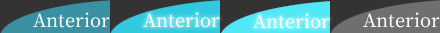
<style>
.page{position:relative;width:440px;height:33px;background:#333333}
.page>*{position:absolute;margin:0}
.t1{font:22px "OfficialFateFont-Medium";color:#ffffff}
</style>
<div class="page">
<p class="t1" style="left:33px;top:12px;width:77px;height:16px">Anterior</p>
<p class="t1" style="left:143px;top:12px;width:77px;height:16px">Anterior</p>
<p class="t1" style="left:253px;top:13px;width:77px;height:16px">Anterior</p>
<p class="t1" style="left:363px;top:12px;width:77px;height:16px">Anterior</p>
</div>
